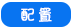
<style>
.page{position:relative;width:72px;height:28px;background:#0874f1}
.page>*{position:absolute;margin:0}
.t1{font:16px "Jkaton";letter-spacing:0.1em;color:#ffffff}
</style>
<div class="page">
<p class="t1" style="left:21px;top:7px;width:31px;height:15px">配置</p>
</div>
